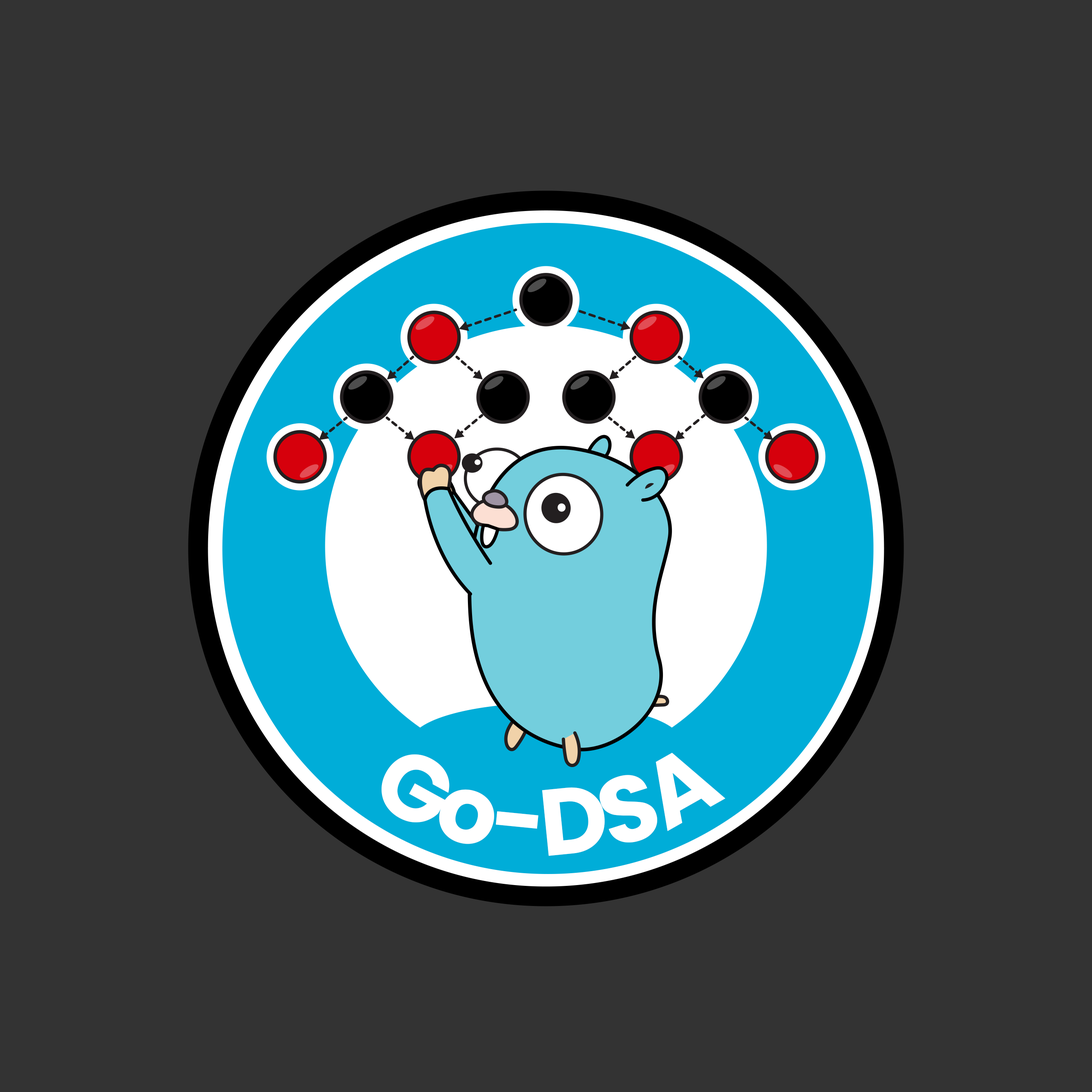
<style>
.page{position:relative;width:1092px;height:1092px;background:#333333}
.page>*{position:absolute;margin:0}
.t1{font:93.9px "Poppins-Bold";color:#ffffff}
</style>
<div class="page">
<p class="t1" style="left:381px;top:753px;width:345px;height:103px">Go-DSA</p>
</div>
